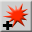
<style>
.page{position:relative;width:32px;height:32px;background:#cdcdcd}
.page>*{position:absolute;margin:0}
.t1{font:18px "Arial-Black";color:#000000}
</style>
<div class="page">
<p class="t1" style="left:2px;top:21px;width:11px;height:9px">+</p>
</div>
